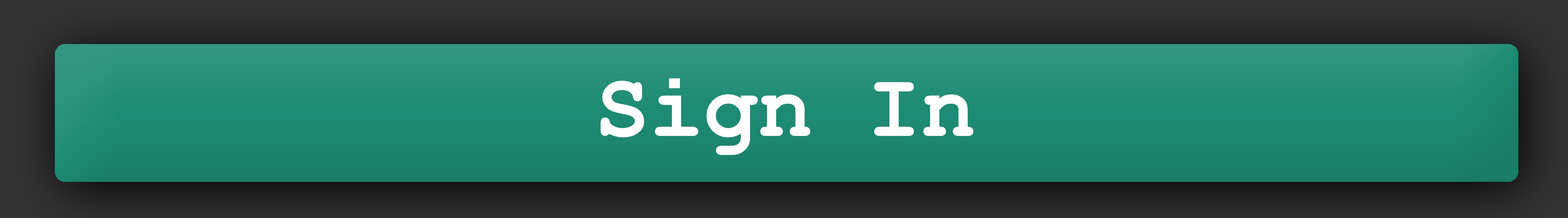
<style>
.page{position:relative;width:1568px;height:218px}
.page>*{position:absolute;margin:0}
.t1{font:90.6px "CourierNewPS-BoldMT";color:#ffffff}
</style>
<div class="page">
<p class="t1" style="left:601px;top:78px;width:372px;height:77px">Sign In</p>
</div>
